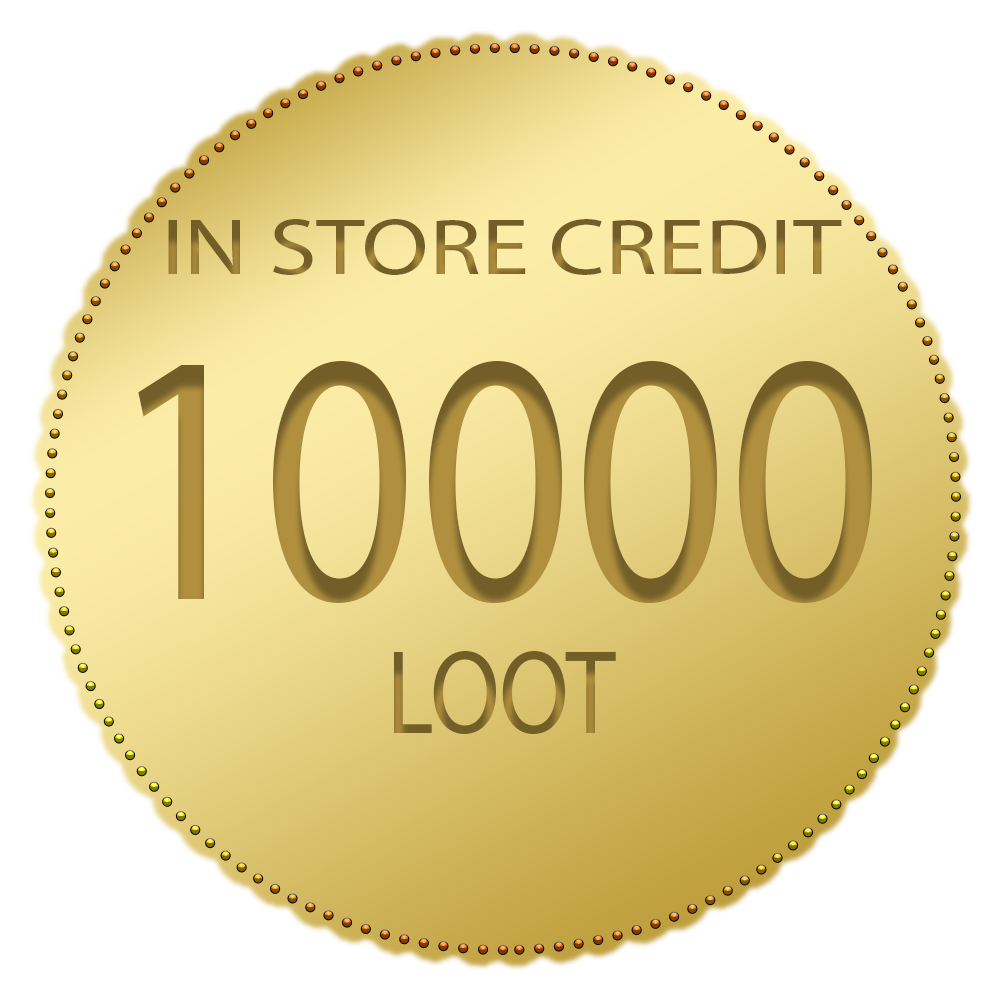
<style>
.page{position:relative;width:1000px;height:1000px;background:#ffffff}
.page>*{position:absolute;margin:0}
.t1{font:80px "MyriadPro-Regular";scale:1.21 1}
.t2{font:360.4px "MyriadPro-Regular";color:#b0903e;scale:0.84 1}
.t3{font:120px "MyriadPro-Regular";scale:0.84 1}
</style>
<div class="page">
<p class="t1" style="left:168px;top:219px;width:674px;height:56px">IN STORE CREDIT</p>
<p class="t2" style="left:138px;top:361px;width:734px;height:242px">10000</p>
<p class="t3" style="left:394px;top:651px;width:222px;height:83px">LOOT</p>
</div>
